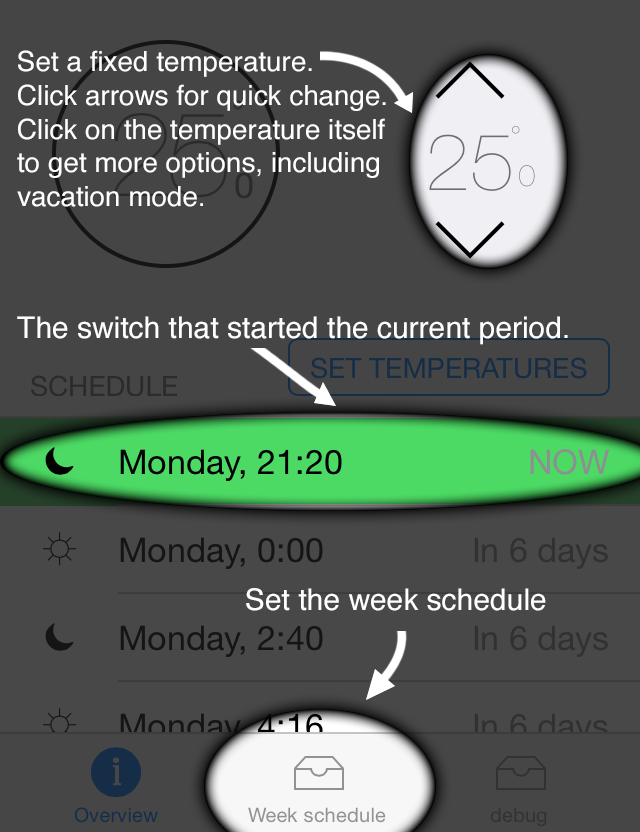
<style>
.page{position:relative;width:640px;height:832px;background:#454546}
.page>*{position:absolute;margin:0}
.t1{font:28px "Helvetica";color:#ffffff}
.t2{font:29.9px "Helvetica";color:#ffffff}
</style>
<div class="page">
<p class="t1" style="left:17px;top:50px;width:369px;height:157px">Set a fixed temperature.<br>Click arrows for quick change.<br>Click on the temperature itself to get more options, including vacation mode.</p>
<p class="t2" style="left:17px;top:316px;width:551px;height:29px">The switch that started the current period.</p>
<p class="t2" style="left:246px;top:588px;width:300px;height:23px">Set the week schedule</p>
</div>
